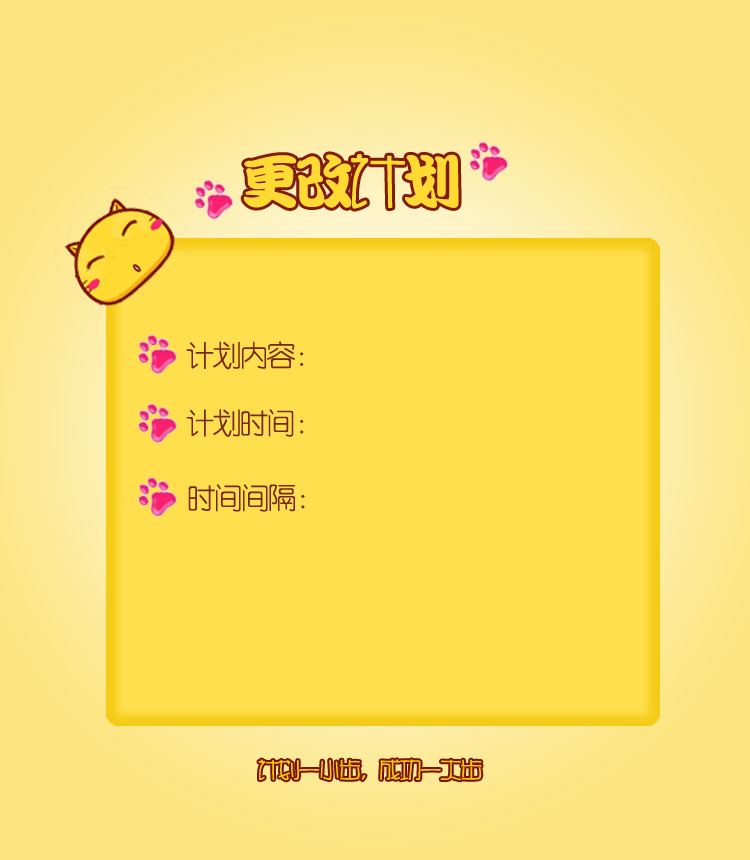
<style>
.page{position:relative;width:750px;height:860px;background:#ffdf4e}
.page>*{position:absolute;margin:0}
.t1{font:59px "DFKanTingLiu-XB-HKP-BF";letter-spacing:-0.1em;color:#ffda33}
.t2{font:59px "HYr2gj";letter-spacing:-0.1em;color:#ffda33}
.t3{font:29.5px "YouYuan";letter-spacing:-0.1em;color:#78260d}
.t4{font:22.1px "HYr2gj";letter-spacing:-0.1em;color:#f5c907}
</style>
<div class="page">
<p class="t1" style="left:243px;top:154px;width:216px;height:55px">更改<span class="t2">计</span>划</p>
<p class="t3" style="left:186px;top:341px;width:118px;height:29px">计划内容：</p>
<p class="t3" style="left:186px;top:409px;width:118px;height:28px">计划时间：</p>
<p class="t3" style="left:188px;top:484px;width:117px;height:28px">时间间隔：</p>
<p class="t4" style="left:258px;top:759px;width:224px;height:22px">计划一小步，成功一大步</p>
</div>
